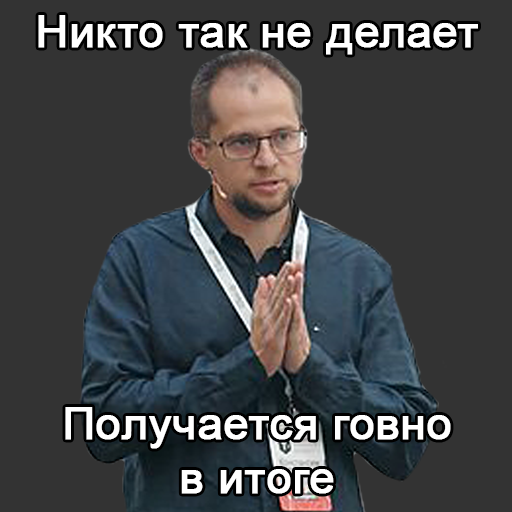
<style>
.page{position:relative;width:512px;height:512px;background:#333333}
.page>*{position:absolute;margin:0}
.t1{font:45px "ArialMT";color:#ffffff;font-weight:bold}
</style>
<div class="page">
<p class="t1" style="left:38px;top:15px;width:440px;height:40px">Никто так не делает</p>
<p class="t1" style="left:65px;top:407px;width:386px;height:87px;text-align:center">Получается говно<br>в итоге</p>
</div>
